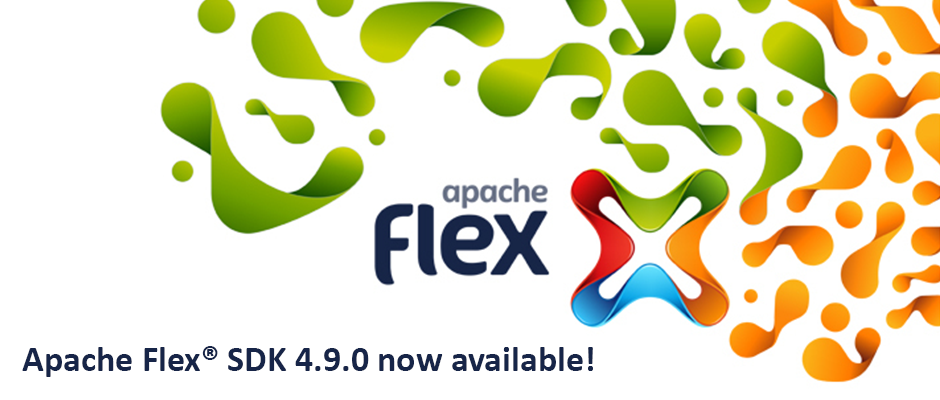
<style>
.page{position:relative;width:940px;height:400px;background:#ffffff}
.page>*{position:absolute;margin:0}
.t1{font:36px "Calibri-Bold";color:#172548}
</style>
<div class="page">
<p class="t1" style="left:22px;top:346px;width:571px;height:31px">Apache Flex® SDK 4.9.0 now available!</p>
</div>
